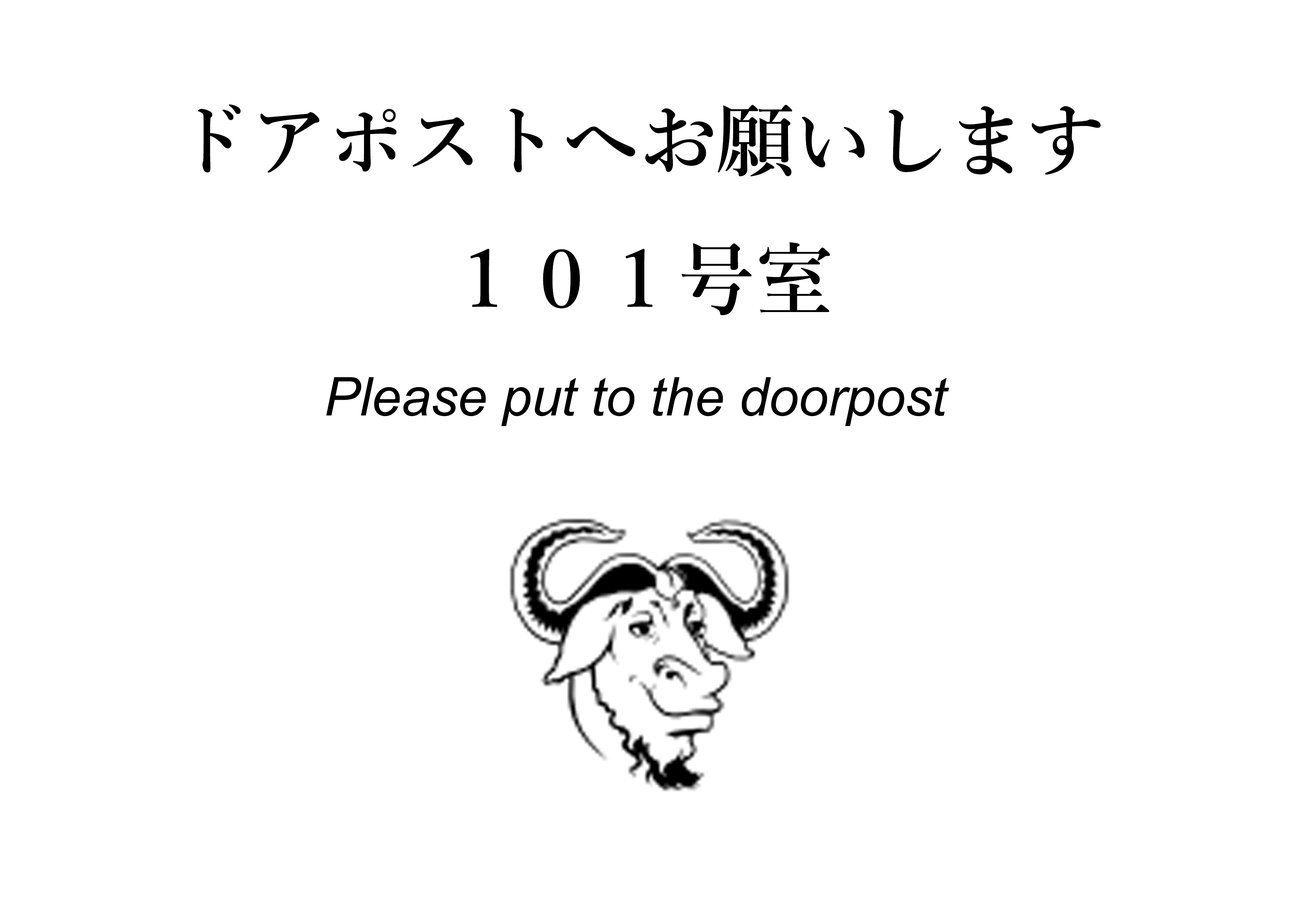
<style>
.page{position:relative;width:1299px;height:918px;background:#ffffff}
.page>*{position:absolute;margin:0}
.t1{font:79.1px "YuMin-Demibold";color:#000000}
.t2{font:53.3px "Arial-ItalicMT";color:#000000}
</style>
<div class="page">
<p class="t1" style="left:198px;top:104px;width:903px;height:211px;text-align:center">ドアポストへお願いします<br>１０１号室</p>
<p class="t2" style="left:326px;top:377px;width:623px;height:49px">Please put to the doorpost</p>
</div>
